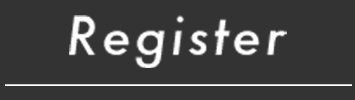
<style>
.page{position:relative;width:355px;height:100px;background:#333333}
.page>*{position:absolute;margin:0}
.t1{font:52px "Futura-MediumItalic";letter-spacing:0.075em;color:#ffffff}
</style>
<div class="page">
<p class="t1" style="left:69px;top:15px;width:218px;height:53px">Register</p>
</div>
